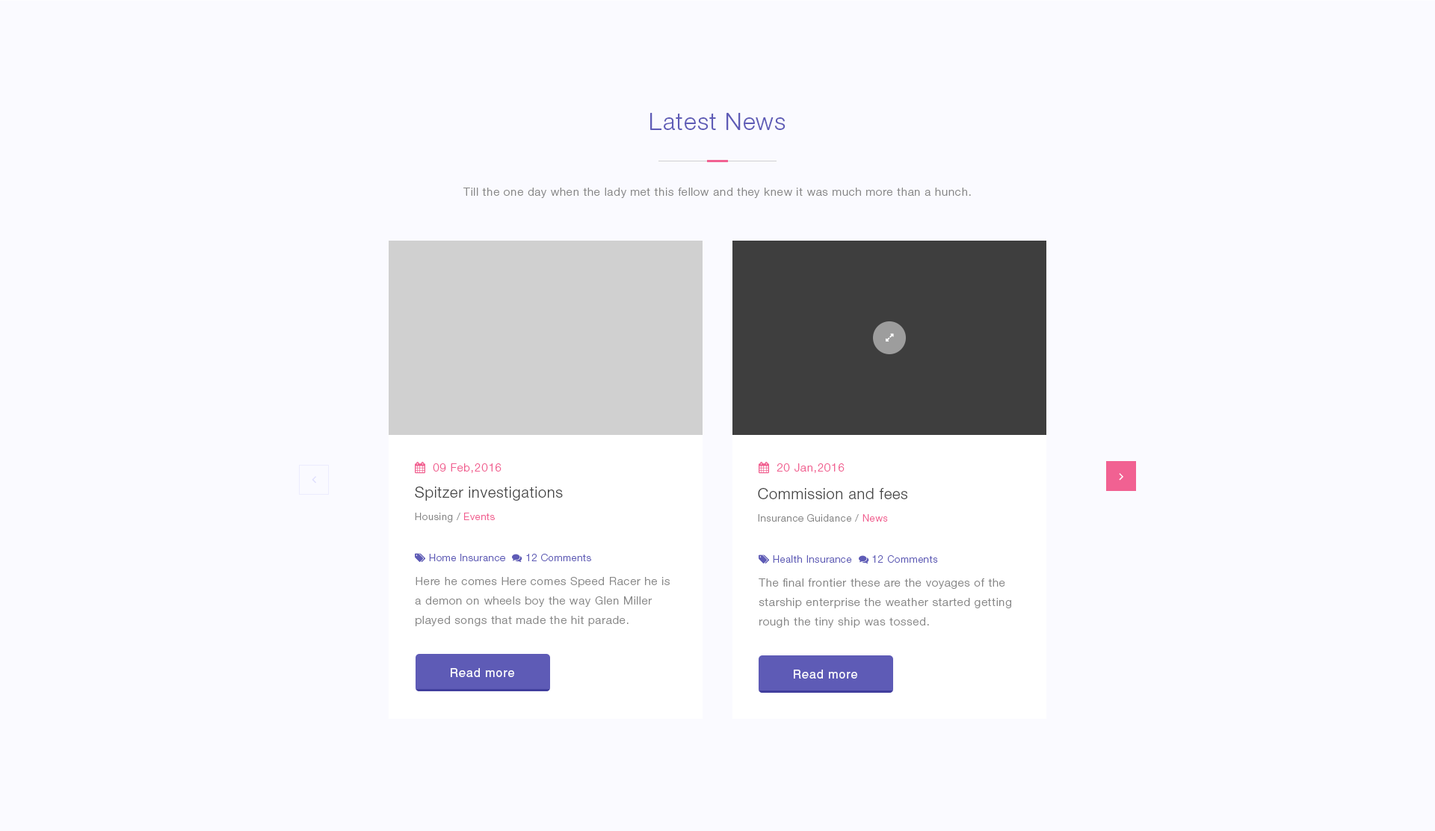
<style>
.page{position:relative;width:1435px;height:831px;background:#fafaff}
.page>*{position:absolute;margin:0}
.t1{font:23.9px "HelveticaNeueLTStd-Lt";letter-spacing:0.035em;color:#5e5bb6}
.t2{font:11.2px "HelveticaNeueLTStd-Lt";letter-spacing:0.06em;color:#888888}
.t3{font:14.9px/22.4px "HelveticaNeueLTStd-Lt";letter-spacing:0.04em;color:#444444}
.t4{font:9.7px/22.4px "HelveticaNeueLTStd-Lt";letter-spacing:0.06em;color:#888888}
.t5{font:9.7px/22.4px "HelveticaNeueLTStd-Lt";letter-spacing:0.06em;color:#f16192}
.t6{font:11.2px/19.4px "HelveticaNeueLTStd-Lt";letter-spacing:0.06em;color:#888888}
.t7{font:12px "Helvetica";letter-spacing:0.06em;color:#ffffff}
</style>
<div class="page">
<p class="t1" style="left:650px;top:113px;width:135px;height:17px">Latest News</p>
<p class="t2" style="left:463px;top:188px;width:508px;height:10px">Till the one day when the lady met this fellow and they knew it was much more than a hunch.</p>
<p class="t3" style="left:415px;top:487px;width:148px;height:35px">Spitzer investigations<br><span class="t4">Housing / </span><span class="t5">Events</span></p>
<p class="t4" style="left:758px;top:488px;width:149px;height:34px"><span class="t3">Commission and fees<br></span>Insurance Guidance / <span class="t5">News</span></p>
<p class="t6" style="left:415px;top:577px;width:255px;height:49px">Here he comes Here comes Speed Racer he is a demon on wheels boy the way Glen Miller played songs that made the hit parade.</p>
<p class="t6" style="left:759px;top:578px;width:252px;height:50px">The final frontier these are the voyages of the starship enterprise the weather started getting rough the tiny ship was tossed.</p>
<p class="t7" style="left:451px;top:668px;width:63px;height:9px">Read more</p>
<p class="t7" style="left:794px;top:670px;width:63px;height:9px">Read more</p>
</div>
